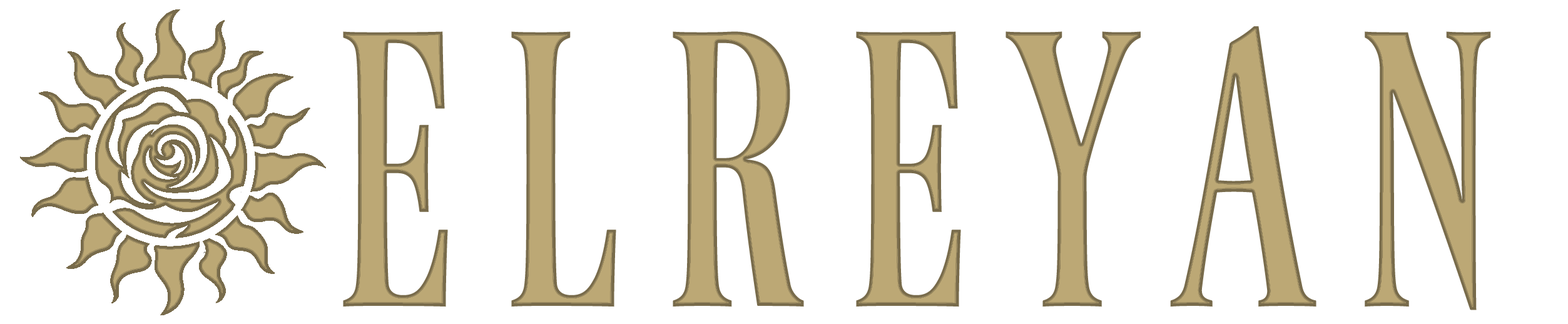
<style>
.page{position:relative;width:1568px;height:324px;background:#ffffff}
.page>*{position:absolute;margin:0}
.t1{font:333.7px "Ferrum";letter-spacing:0.05em;color:#bca875}
</style>
<div class="page">
<p class="t1" style="left:343px;top:26px;width:1148px;height:284px">ELREYAN</p>
</div>
